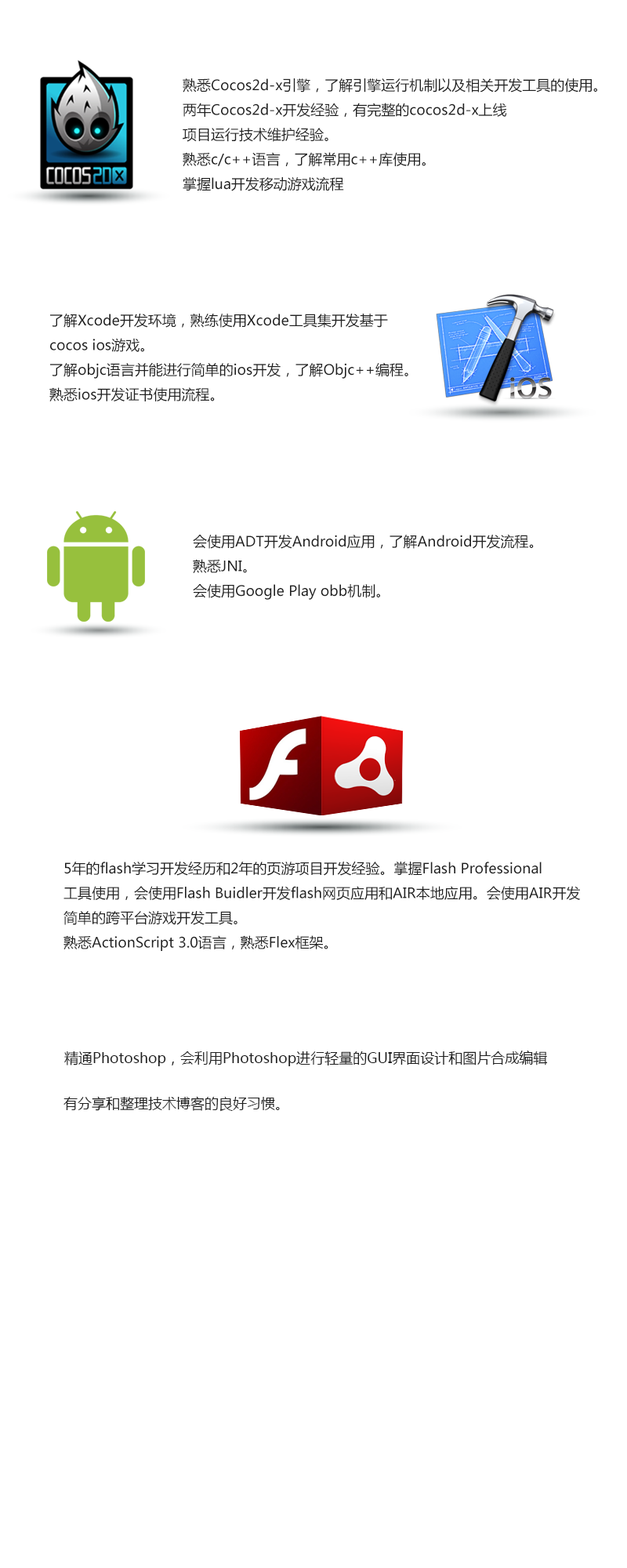
<style>
.page{position:relative;width:627px;height:1568px;background:#ffffff}
.page>*{position:absolute;margin:0}
.t1{font:14.1px "MicrosoftYaHei";color:#202020}
</style>
<div class="page">
<p class="t1" style="left:183px;top:78px;width:414px;height:113px">熟悉Cocos2d-x引擎，了解引擎运行机制以及相关开发工具的使用。<br>两年Cocos2d-x开发经验，有完整的cocos2d-x上线<br>项目运行技术维护经验。<br>熟悉c/c++语言，了解常用c++库使用。<br>掌握lua开发移动游戏流程</p>
<p class="t1" style="left:49px;top:314px;width:359px;height:87px">了解Xcode开发环境，熟练使用Xcode工具集开发基于<br>cocos ios游戏。<br>了解objc语言并能进行简单的ios开发，了解Objc++编程。<br>熟悉ios开发证书使用流程。</p>
<p class="t1" style="left:193px;top:534px;width:341px;height:66px">会使用ADT开发Android应用，了解Android开发流程。<br>熟悉JNI。<br>会使用Google Play obb机制。</p>
<p class="t1" style="left:64px;top:861px;width:517px;height:90px">5年的flash学习开发经历和2年的页游项目开发经验。掌握Flash Professional<br>工具使用，会使用Flash Buidler开发flash网页应用和AIR本地应用。会使用AIR开发<br>简单的跨平台游戏开发工具。<br>熟悉ActionScript 3.0语言，熟悉Flex框架。</p>
<p class="t1" style="left:64px;top:1051px;width:484px;height:15px">精通Photoshop，会利用Photoshop进行轻量的GUI界面设计和图片合成编辑</p>
<p class="t1" style="left:64px;top:1096px;width:216px;height:16px">有分享和整理技术博客的良好习惯。</p>
</div>
